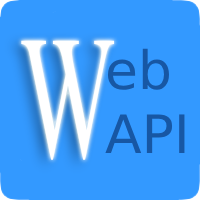
<style>
.page{position:relative;width:200px;height:200px;background:#3399ff}
.page>*{position:absolute;margin:0}
.t1{font:261.9px "Microsoft-Himalaya";color:#ffffff;scale:0.57 1}
.t2{font:52.9px "DejaVuSans";color:#1757a4}
</style>
<div class="page">
<p class="t1" style="left:21px;top:40px;width:94px;height:120px">W</p>
<p class="t2" style="left:105px;top:48px;width:80px;height:105px">eb<br>API</p>
</div>
